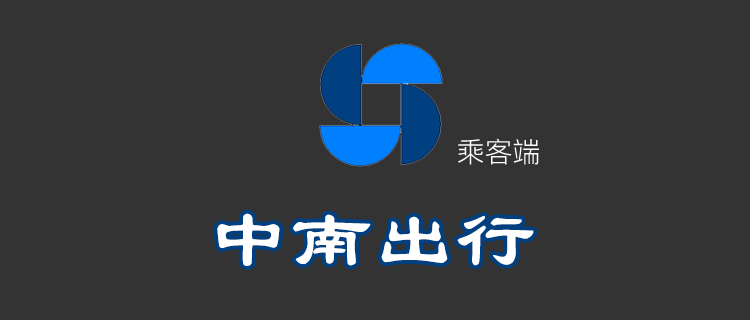
<style>
.page{position:relative;width:750px;height:320px;background:#333333}
.page>*{position:absolute;margin:0}
.t1{font:28px "PingFang-SC-Regular";color:#ffffff}
.t2{font:80px "-G-l-e-i-0-0-b";color:#ffffff;font-weight:bold}
</style>
<div class="page">
<p class="t1" style="left:458px;top:138px;width:81px;height:27px">乘客端</p>
<p class="t2" style="left:217px;top:213px;width:317px;height:53px">中南出行</p>
</div>
